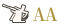
<style>
.page{position:relative;width:69px;height:27px;background:#ffffff}
.page>*{position:absolute;margin:0}
.t1{font:18px "RyuminPro-ExBold";letter-spacing:-0.08em;color:#ae9442;scale:0.9 1}
</style>
<div class="page">
<p class="t1" style="left:33px;top:7px;width:25px;height:14px">AA</p>
</div>
